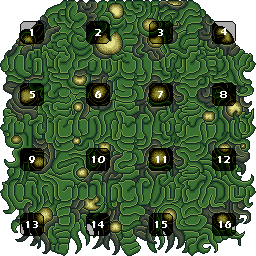
<style>
.page{position:relative;width:256px;height:256px;background:#3b7033}
.page>*{position:absolute;margin:0}
.t1{font:10px "ErasITC-Bold";letter-spacing:0.02em;color:#ffffff}
</style>
<div class="page">
<p class="t1" style="left:30px;top:29px;width:3px;height:7px">1</p>
<p class="t1" style="left:95px;top:29px;width:6px;height:7px">2</p>
<p class="t1" style="left:158px;top:29px;width:5px;height:7px">3</p>
<p class="t1" style="left:221px;top:28px;width:6px;height:7px">4</p>
<p class="t1" style="left:30px;top:91px;width:5px;height:7px">5</p>
<p class="t1" style="left:95px;top:91px;width:6px;height:7px">6</p>
<p class="t1" style="left:158px;top:91px;width:5px;height:7px">7</p>
<p class="t1" style="left:220px;top:91px;width:7px;height:7px">8</p>
<p class="t1" style="left:29px;top:156px;width:6px;height:7px">9</p>
<p class="t1" style="left:92px;top:156px;width:13px;height:7px">10</p>
<p class="t1" style="left:156px;top:156px;width:10px;height:7px">11</p>
<p class="t1" style="left:218px;top:156px;width:12px;height:7px">12</p>
<p class="t1" style="left:26px;top:221px;width:12px;height:7px">13</p>
<p class="t1" style="left:92px;top:221px;width:12px;height:7px">14</p>
<p class="t1" style="left:155px;top:221px;width:12px;height:7px">15</p>
<p class="t1" style="left:219px;top:221px;width:12px;height:7px">16</p>
</div>
